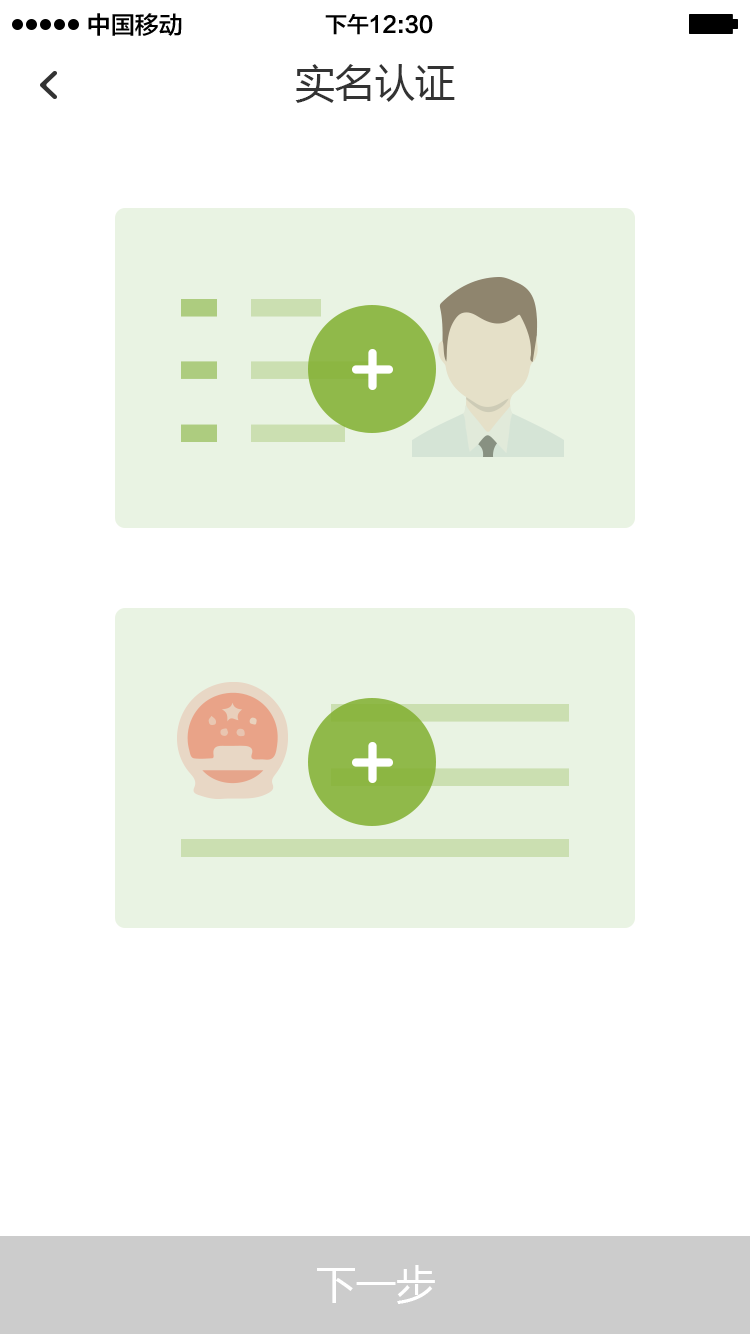
<style>
.page{position:relative;width:750px;height:1334px;background:#ffffff}
.page>*{position:absolute;margin:0}
.t1{font:24px "FZLTZHK--GBK1-0";color:#000000}
.t2{font:22px "FZLTZHK--GBK1-0";color:#000000}
.t3{font:40px "MicrosoftYaHei";color:#333333}
.t4{font:40px "MicrosoftYaHei";color:#ffffff}
</style>
<div class="page">
<p class="t1" style="left:88px;top:13px;width:94px;height:23px">中国移动</p>
<p class="t2" style="left:325px;top:14px;width:108px;height:21px">下午12:30</p>
<p class="t3" style="left:295px;top:64px;width:160px;height:39px">实名认证</p>
<p class="t4" style="left:317px;top:1265px;width:118px;height:39px">下一步</p>
</div>
